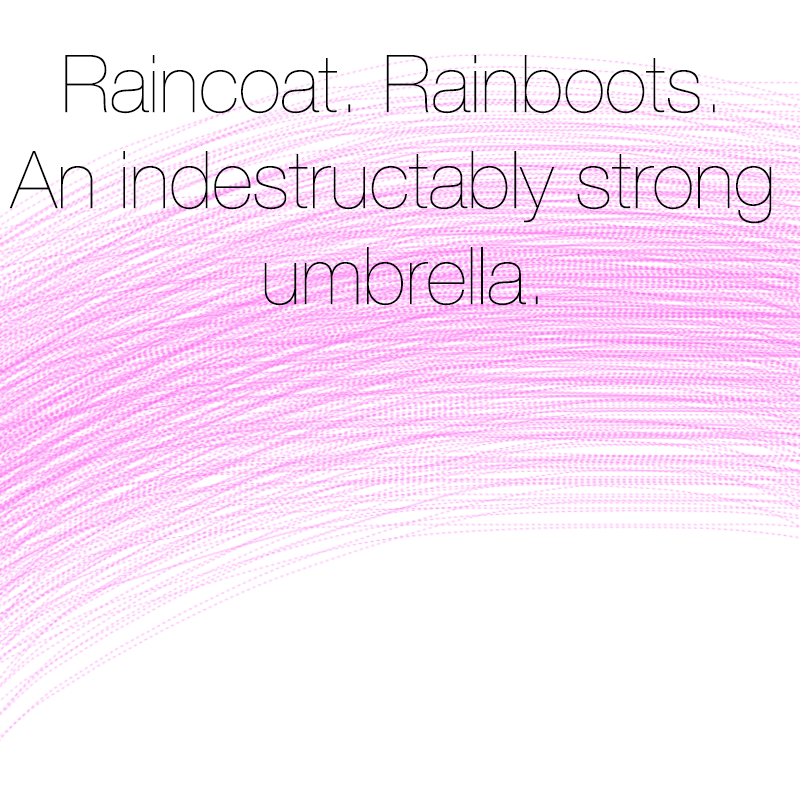
<style>
.page{position:relative;width:800px;height:800px;background:#ffffff}
.page>*{position:absolute;margin:0}
.t1{font:80px "HelveticaNeue-UltraLight";color:#000000}
</style>
<div class="page">
<p class="t1" style="left:9px;top:55px;width:763px;height:251px;text-align:center">Raincoat. Rainboots. <br>An indestructably strong <br>umbrella.</p>
</div>
